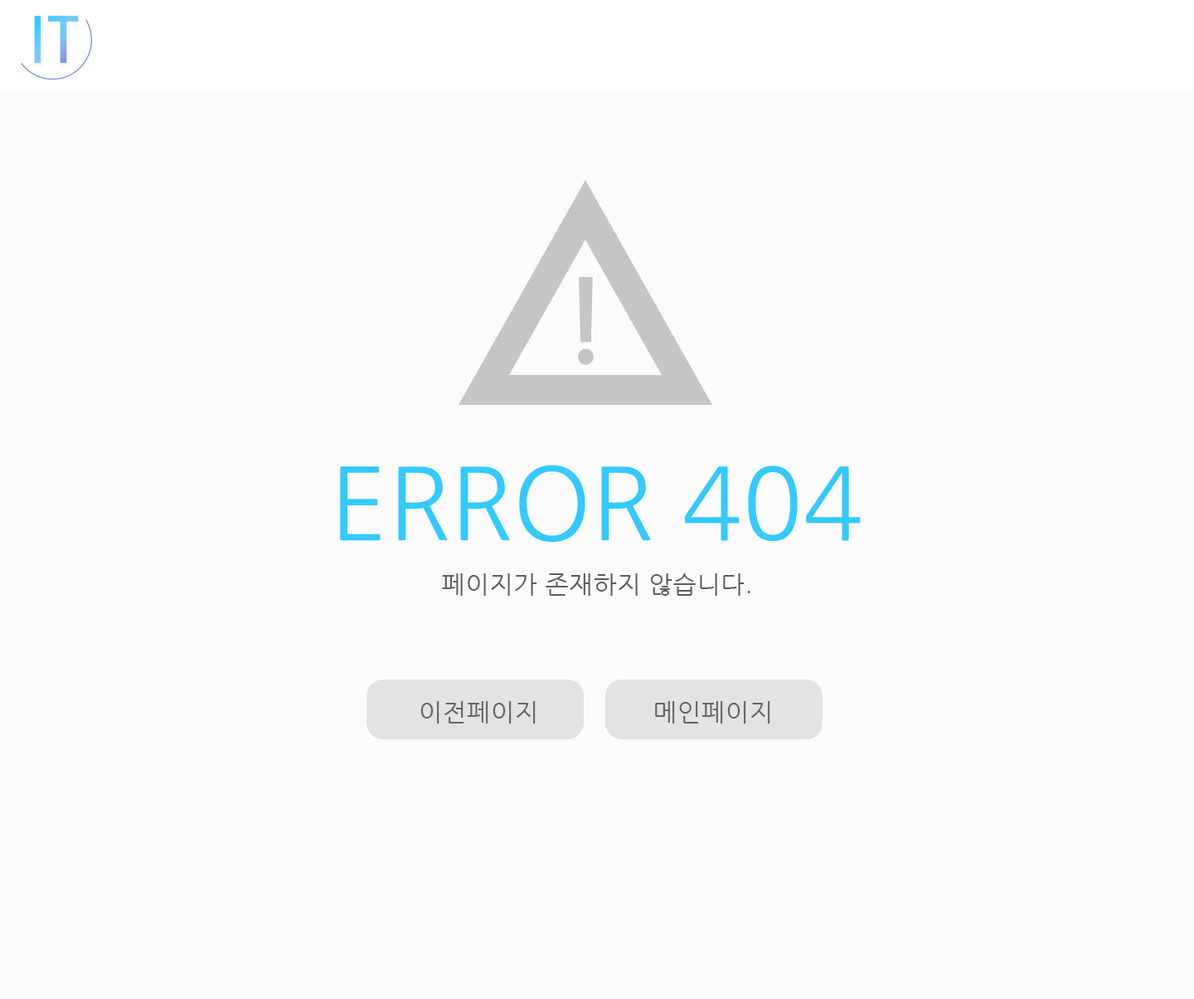
<style>
.page{position:relative;width:1194px;height:999px;background:#fbfbfb}
.page>*{position:absolute;margin:0}
.t1{font:112.8px "NanumGothicBold";letter-spacing:0.025em;color:#c5c5c5;scale:0.97 1}
.t2{font:99.5px "NanumGothic";color:#32caff}
.t3{font:24.9px "NanumGothic";letter-spacing:0.025em;color:#5c5c5c}
.t4{font:24.9px "NanumGothic";letter-spacing:0.025em;color:#656565}
</style>
<div class="page">
<p class="t1" style="left:578px;top:276px;width:16px;height:89px">!</p>
<p class="t2" style="left:340px;top:464px;width:521px;height:78px">ERROR 404</p>
<p class="t3" style="left:442px;top:573px;width:309px;height:22px">페이지가 존재하지 않습니다.</p>
<p class="t4" style="left:420px;top:701px;width:116px;height:22px">이전페이지</p>
<p class="t4" style="left:655px;top:701px;width:115px;height:22px">메인페이지</p>
</div>
